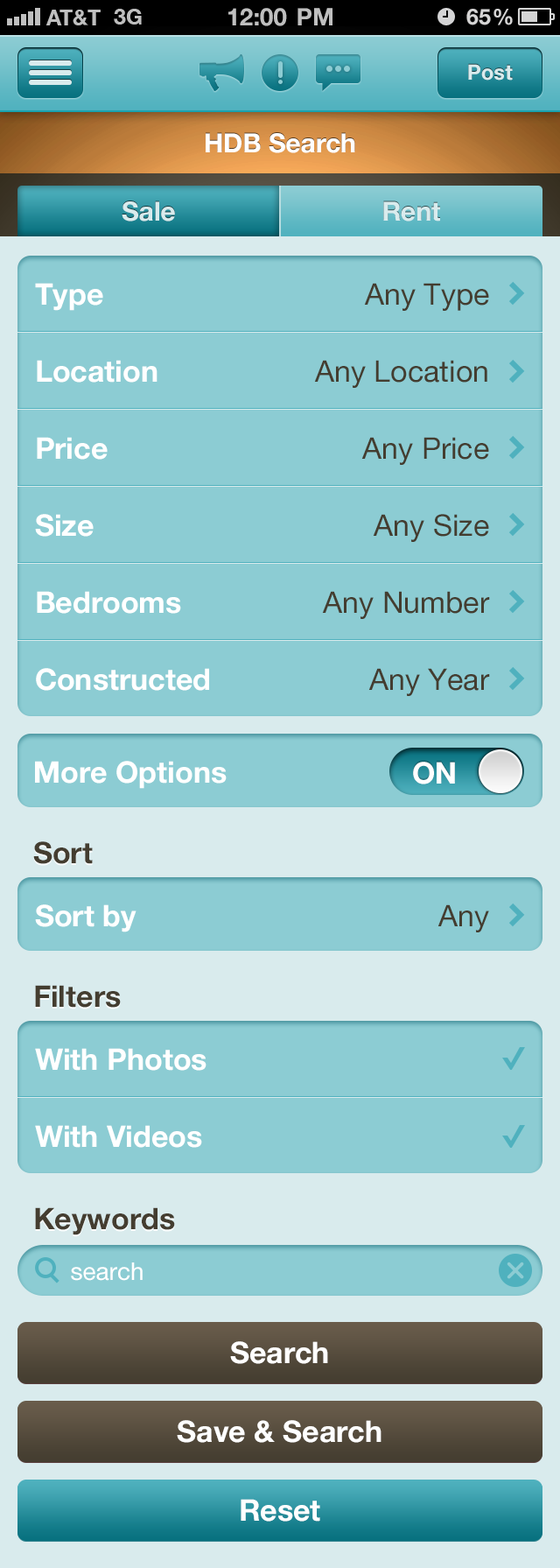
<style>
.page{position:relative;width:560px;height:1568px;background:#8cccd3}
.page>*{position:absolute;margin:0}
.t1{font:21px "HelveticaNeueLTCom-Bd";color:#d9ebed}
.t2{font:26.3px "HelveticaNeueLTCom-Bd";color:#ffffff}
.t3{font:26.3px "HelveticaNeueLTCom-Bd";color:#d9ebed}
.t4{font:29.8px/77px "HelveticaNeueLTCom-Bd";color:#ffffff}
.t5{font:29.8px/77px "HelveticaNeueLTCom-Roman";color:#443d30}
.t6{font:29.8px "HelveticaNeueLTCom-Bd";color:#ffffff}
.t7{font:29.8px "HelveticaNeueLTCom-Bd";color:#443d30}
.t8{font:29.8px "HelveticaNeueLTCom-Roman";color:#443d30}
.t9{font:24.5px "HelveticaNeueLTCom-Roman";color:#ffffff}
</style>
<div class="page">
<p class="t1" style="left:468px;top:64px;width:45px;height:17px">Post</p>
<p class="t2" style="left:206px;top:133px;width:149px;height:20px">HDB Search</p>
<p class="t3" style="left:122px;top:201px;width:53px;height:20px">Sale</p>
<p class="t3" style="left:383px;top:201px;width:57px;height:20px">Rent</p>
<p class="t4" style="left:35px;top:283px;width:174px;height:408px">Type<br>Location<br>Price<br>Size<br>Bedrooms<br>Constructed</p>
<p class="t5" style="left:314px;top:283px;width:176px;height:413px;text-align:right">Any Type<br>Any Location<br>Any Price<br>Any Size<br>Any Number<br>Any Year</p>
<p class="t6" style="left:35px;top:761px;width:192px;height:28px">More Options</p>
<p class="t6" style="left:413px;top:762px;width:42px;height:22px">ON</p>
<p class="t7" style="left:33px;top:841px;width:60px;height:23px">Sort</p>
<p class="t6" style="left:35px;top:904px;width:102px;height:28px">Sort by</p>
<p class="t8" style="left:438px;top:904px;width:51px;height:28px">Any</p>
<p class="t7" style="left:35px;top:985px;width:86px;height:23px">Filters</p>
<p class="t4" style="left:35px;top:1048px;width:172px;height:100px">With Photos<br>With Videos</p>
<p class="t7" style="left:35px;top:1207px;width:140px;height:28px">Keywords</p>
<p class="t9" style="left:71px;top:1262px;width:72px;height:19px">search</p>
<p class="t6" style="left:230px;top:1341px;width:98px;height:23px">Search</p>
<p class="t6" style="left:177px;top:1420px;width:205px;height:23px">Save &amp; Search</p>
<p class="t6" style="left:241px;top:1499px;width:79px;height:23px">Reset</p>
</div>
